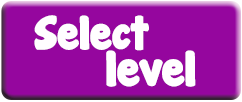
<style>
.page{position:relative;width:242px;height:102px;background:#95069e}
.page>*{position:absolute;margin:0}
.t1{font:43px "JandaManateeSolid";color:#fffeff}
.t2{font:45px "JandaManateeSolid";color:#fffeff}
</style>
<div class="page">
<p class="t1" style="left:34px;top:15px;width:115px;height:36px">Select</p>
<p class="t2" style="left:106px;top:50px;width:90px;height:37px">level</p>
</div>
